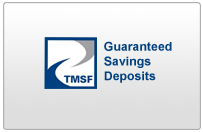
<style>
.page{position:relative;width:203px;height:132px}
.page>*{position:absolute;margin:0}
.t1{font:12.3px "Arial-BoldMT";color:#004080}
</style>
<div class="page">
<p class="t1" style="left:104px;top:41px;width:68px;height:42px">Guaranteed <br>Savings <br>Deposits</p>
</div>
